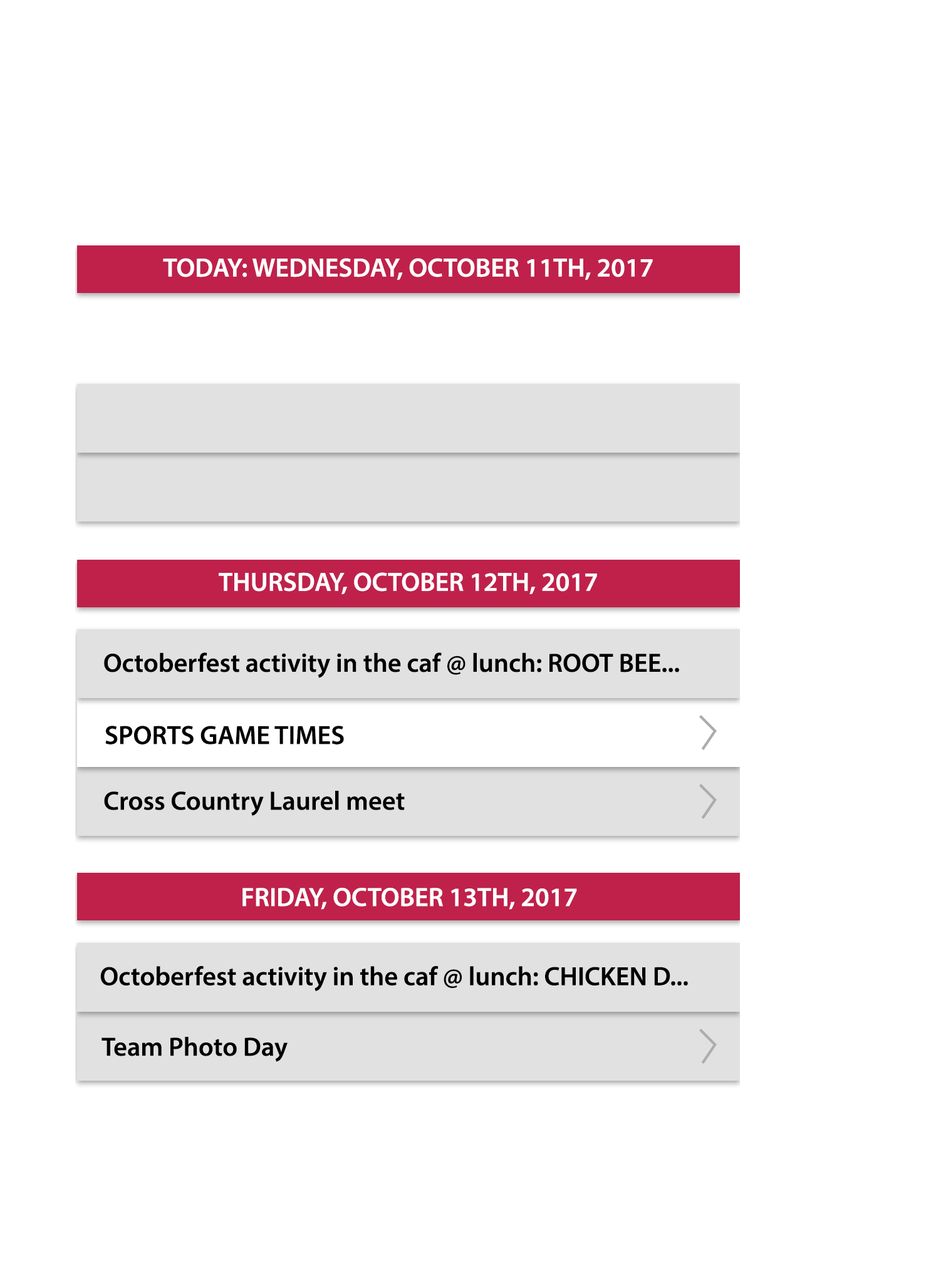
<style>
.page{position:relative;width:931px;height:1281px;background:#ffffff}
.page>*{position:absolute;margin:0}
.t1{font:26.5px "MyriadPro-Semibold";color:#ffffff}
.t2{font:26.5px "MyriadPro-Semibold";color:#000000}
</style>
<div class="page">
<p class="t1" style="left:163px;top:258px;width:490px;height:22px">TODAY: WEDNESDAY, OCTOBER 11TH, 2017</p>
<p class="t1" style="left:219px;top:572px;width:378px;height:22px">THURSDAY, OCTOBER 12TH, 2017</p>
<p class="t2" style="left:104px;top:653px;width:575px;height:25px">Octoberfest activity in the caf @ lunch: ROOT BEE...</p>
<p class="t2" style="left:105px;top:726px;width:239px;height:19px">SPORTS GAME TIMES</p>
<p class="t2" style="left:104px;top:791px;width:301px;height:25px">Cross Country Laurel meet</p>
<p class="t1" style="left:242px;top:888px;width:335px;height:22px">FRIDAY, OCTOBER 13TH, 2017</p>
<p class="t2" style="left:100px;top:966px;width:588px;height:25px">Octoberfest activity in the caf @ lunch: CHICKEN D...</p>
<p class="t2" style="left:101px;top:1037px;width:186px;height:25px">Team Photo Day</p>
</div>
